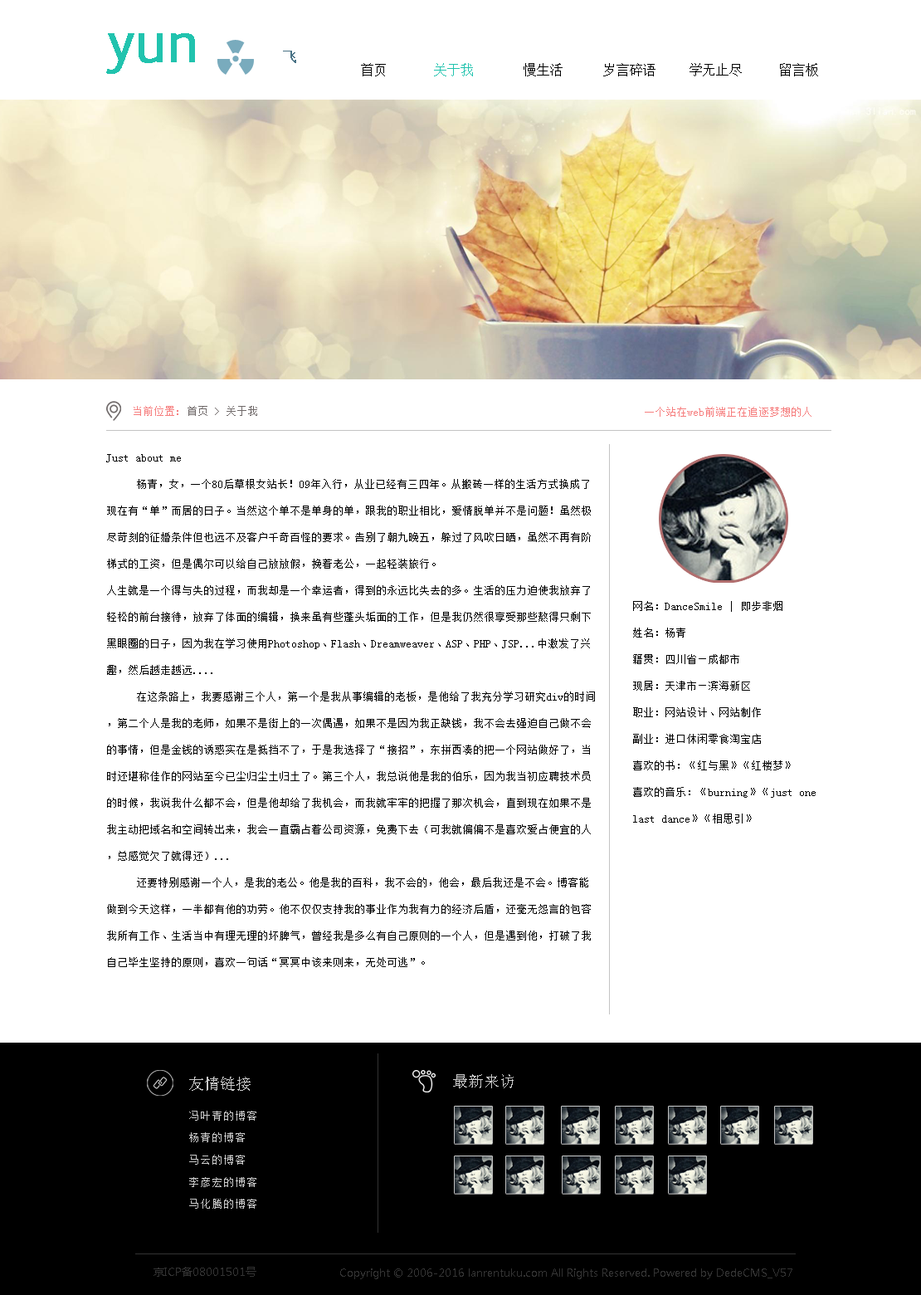
<style>
.page{position:relative;width:921px;height:1295px;background:#ffffff}
.page>*{position:absolute;margin:0}
.t1{font:13.3px "SimSun";color:#040404}
.t2{font:13.3px "SimSun";color:#21c3ae}
.t3{font:13.3px "SimSun";color:#000000}
.t4{font:11.1px "SimSun";color:#706a6a}
.t5{font:11.1px "SimSun";color:#f67f7f}
.t6{font:11.1px/26.6px "SimSun";color:#000000}
.t7{font:11.1px/26.6px "SimSun";color:#c4c4c4}
.t8{font:15.5px "SimSun";color:#cccccc}
.t9{font:11.1px/22.1px "NSimSun";color:#cccccc}
.t10{font:11.1px "MicrosoftYaHei";color:#333333}
</style>
<div class="page">
<p class="t1" style="left:361px;top:63px;width:457px;height:13px">首页    <span class="t2">关于我</span>    慢生活      <span class="t3">岁言碎语</span>  学无止尽  留言板</p>
<p class="t4" style="left:134px;top:406px;width:123px;height:10px"><span class="t5">当前位置:</span> 首页 &gt; 关于我</p>
<p class="t5" style="left:645px;top:407px;width:167px;height:10px">一个站在web前端正在追逐梦想的人</p>
<p class="t6" style="left:106px;top:454px;width:489px;height:513px">Just about me<br> 杨青，女，一个80后草根女站长！09年入行，从业已经有三四年。从搬砖一样的生活方式换成了现在有“单”而居的日子。当然这个单不是单身的单，跟我的职业相比，爱情脱单并不是问题！虽然极尽苛刻的征婚条件但也远不及客户千奇百怪的要求。告别了朝九晚五，躲过了风吹日晒，虽然不再有阶梯式的工资，但是偶尔可以给自己放放假，挽着老公，一起轻装旅行。<br>人生就是一个得与失的过程，而我却是一个幸运者，得到的永远比失去的多。生活的压力迫使我放弃了轻松的前台接待，放弃了体面的编辑，换来虽有些蓬头垢面的工作，但是我仍然很享受那些熬得只剩下黑眼圈的日子，因为我在学习使用Photoshop、Flash、Dreamweaver、ASP、PHP、JSP...中激发了兴趣，然后越走越远....<br> 在这条路上，我要感谢三个人，第一个是我从事编辑的老板，是他给了我充分学习研究div的时间，第二个人是我的老师，如果不是街上的一次偶遇，如果不是因为我正缺钱，我不会去强迫自己做不会的事情，但是金钱的诱惑实在是抵挡不了，于是我选择了“接招”，东拼西凑的把一个网站做好了，当时还堪称佳作的网站至今已尘归尘土归土了。第三个人，我总说他是我的伯乐，因为我当初应聘技术员的时候，我说我什么都不会，但是他却给了我机会，而我就牢牢的把握了那次机会，直到现在如果不是我主动把域名和空间转出来，我会一直霸占着公司资源，免费下去（可我就偏偏不是喜欢爱占便宜的人，总感觉欠了就得还）...<br> 还要特别感谢一个人，是我的老公。他是我的百科，我不会的，他会，最后我还是不会。博客能做到今天这样，一半都有他的功劳。他不仅仅支持我的事业作为我有力的经济后盾，还毫无怨言的包容我所有工作、生活当中有理无理的坏脾气，曾经我是多么有自己原则的一个人，但是遇到他，打破了我自己毕生坚持的原则，喜欢一句话“冥冥中该来则来，无处可逃”。<br><span class="t7"><br>About my blog</span></p>
<p class="t6" style="left:633px;top:601px;width:183px;height:222px">网名：DanceSmile | 即步非烟<br>姓名：杨青<br>籍贯：四川省—成都市<br>现居：天津市—滨海新区<br>职业：网站设计、网站制作<br>副业：进口休闲零食淘宝店<br>喜欢的书：《红与黑》《红楼梦》<br>喜欢的音乐：《burning》《just one last dance》《相思引》</p>
<p class="t8" style="left:453px;top:1074px;width:61px;height:14px">最新来访</p>
<p class="t8" style="left:189px;top:1076px;width:62px;height:14px">友情链接</p>
<p class="t9" style="left:189px;top:1110px;width:67px;height:98px">冯叶青的博客<br>杨青的博客<br>马云的博客<br>李彦宏的博客<br>马化腾的博客</p>
<p class="t10" style="left:154px;top:1266px;width:102px;height:10px">京ICP备08001501号</p>
<p class="t10" style="left:340px;top:1268px;width:452px;height:11px">Copyright © 2006-2016 lanrentuku.com All Rights Reserved. Powered by DedeCMS_V57</p>
</div>
